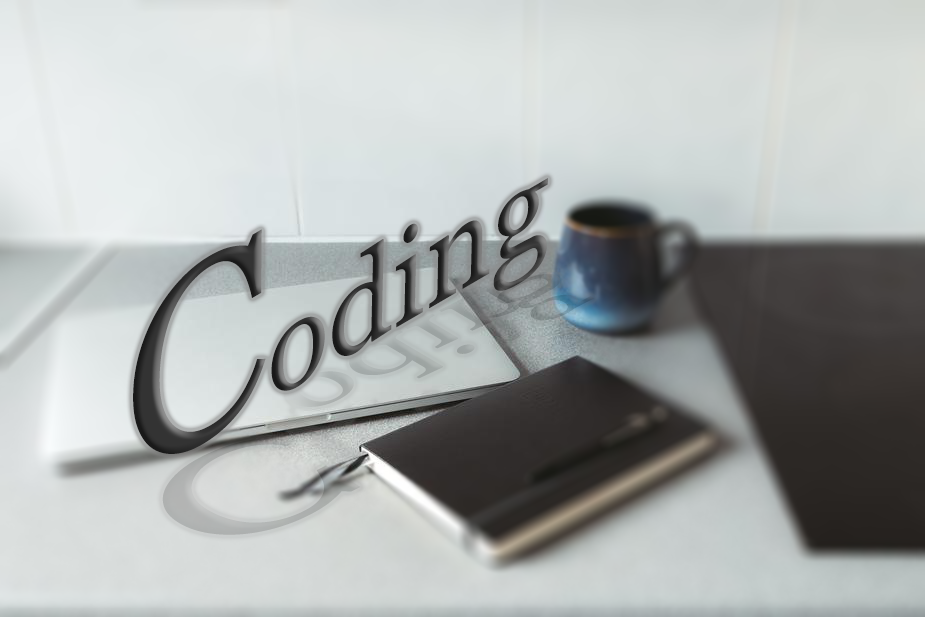
<style>
.page{position:relative;width:925px;height:617px}
.page>*{position:absolute;margin:0}
.t1{font:128.8px "Georgia";color:#333333}
.t2{font:257.7px "Georgia";color:#333333}
</style>
<div class="page">
<p class="t1" style="left:133px;top:178px;width:415px;height:276px;rotate:-30deg"><span class="t2">C</span>oding</p>
</div>
